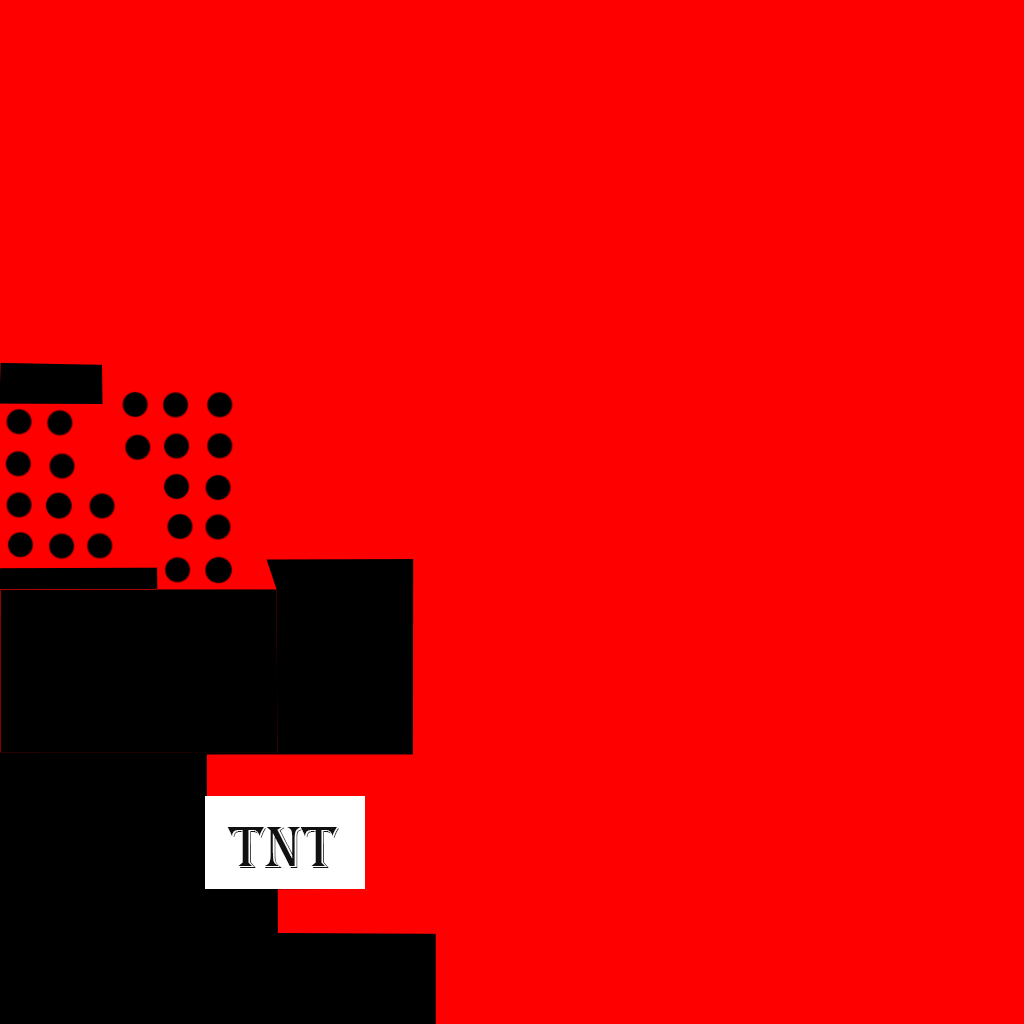
<style>
.page{position:relative;width:1024px;height:1024px;background:#ff0000}
.page>*{position:absolute;margin:0}
.t1{font:62.5px "Algerian";color:#111111}
</style>
<div class="page">
<p class="t1" style="left:227px;top:827px;width:112px;height:41px">TNT</p>
</div>
